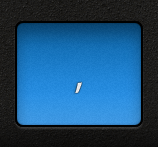
<style>
.page{position:relative;width:158px;height:147px}
.page>*{position:absolute;margin:0}
.t1{font:42px "MyriadPro-Regular";color:#e7e8eb}
</style>
<div class="page">
<p class="t1" style="left:75px;top:82px;width:7px;height:11px">,</p>
</div>
